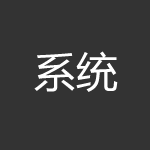
<style>
.page{position:relative;width:150px;height:150px;background:#333333}
.page>*{position:absolute;margin:0}
.t1{font:41.7px "MicrosoftYaHei";color:#ffffff}
</style>
<div class="page">
<p class="t1" style="left:34px;top:51px;width:84px;height:41px">系统</p>
</div>
